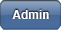
<style>
.page{position:relative;width:61px;height:30px}
.page>*{position:absolute;margin:0}
.t1{font:12px "Helvetica-Bold";color:#ffffff}
</style>
<div class="page">
<p class="t1" style="left:12px;top:10px;width:37px;height:9px">Admin</p>
</div>
